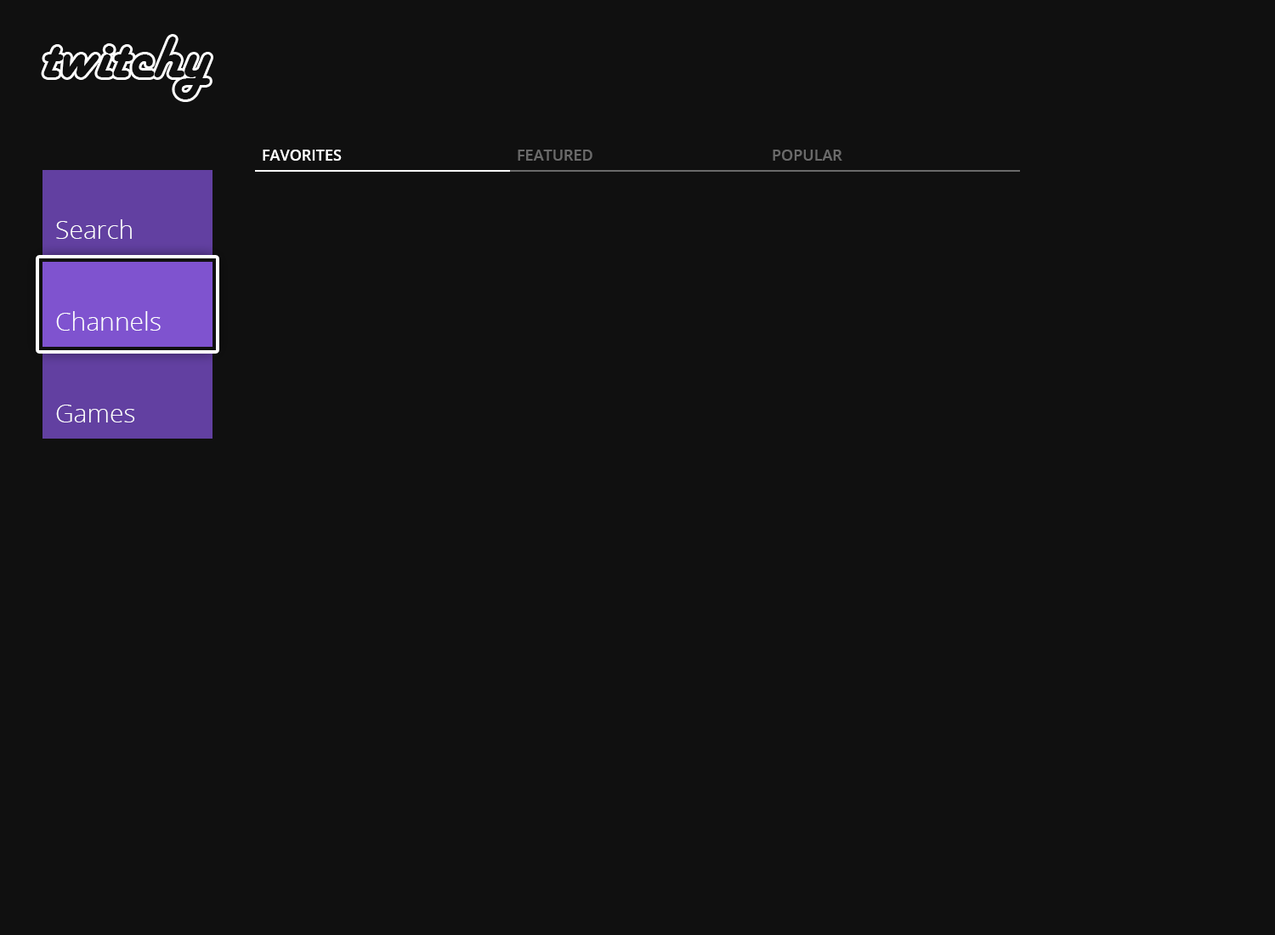
<style>
.page{position:relative;width:1275px;height:935px;background:#101010}
.page>*{position:absolute;margin:0}
.t1{font:15.3px "OpenSans-Semibold";color:#fefefe}
.t2{font:15.3px "OpenSans-Semibold";color:#6a6a6a}
.t3{font:25.5px "OpenSans-Light";color:#ffffff}
</style>
<div class="page">
<p class="t1" style="left:263px;top:150px;width:79px;height:11px">FAVORITES</p>
<p class="t2" style="left:518px;top:150px;width:75px;height:11px">FEATURED</p>
<p class="t2" style="left:773px;top:150px;width:69px;height:11px">POPULAR</p>
<p class="t3" style="left:56px;top:219px;width:76px;height:20px">Search</p>
<p class="t3" style="left:56px;top:311px;width:105px;height:20px">Channels</p>
<p class="t3" style="left:56px;top:405px;width:79px;height:18px">Games</p>
</div>
